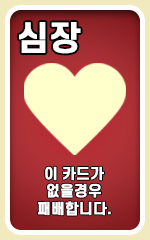
<style>
.page{position:relative;width:150px;height:240px}
.page>*{position:absolute;margin:0}
.t1{font:32.7px "S-CoreDream-6Bold";color:#ffffff;font-weight:bold}
.t2{font:14.2px/17.5px "S-CoreDream-6Bold";color:#ffffff;font-weight:bold}
</style>
<div class="page">
<p class="t1" style="left:19px;top:22px;width:62px;height:32px">심장</p>
<p class="t2" style="left:37px;top:166px;width:74px;height:50px;text-align:center">이 카드가<br>없을경우<br>패배합니다.</p>
</div>
